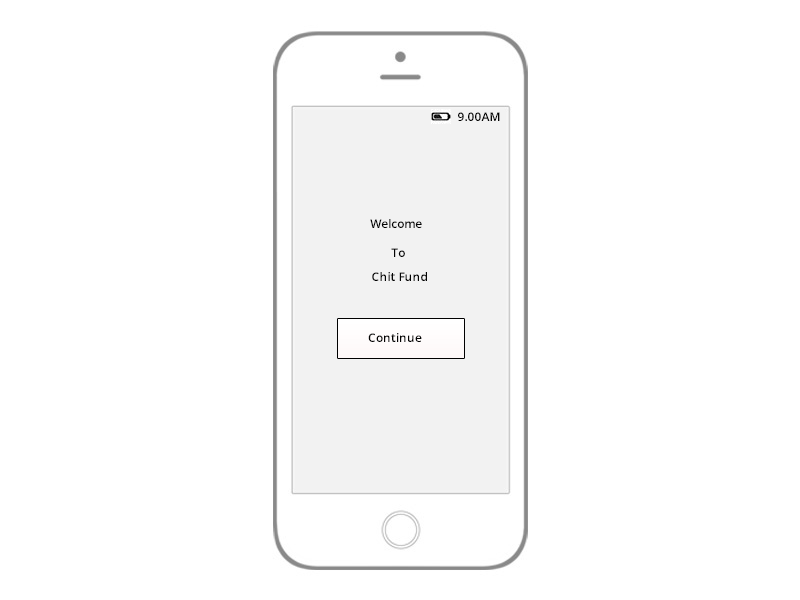
<style>
.page{position:relative;width:800px;height:600px;background:#ffffff}
.page>*{position:absolute;margin:0}
.t1{font:12px "OpenSans-Semibold";color:#030303}
</style>
<div class="page">
<p class="t1" style="left:458px;top:112px;width:42px;height:9px">9.00AM</p>
<p class="t1" style="left:370px;top:219px;width:52px;height:9px">Welcome</p>
<p class="t1" style="left:391px;top:248px;width:14px;height:9px">To</p>
<p class="t1" style="left:372px;top:272px;width:55px;height:9px">Chit Fund</p>
<p class="t1" style="left:368px;top:333px;width:54px;height:9px">Continue</p>
</div>
